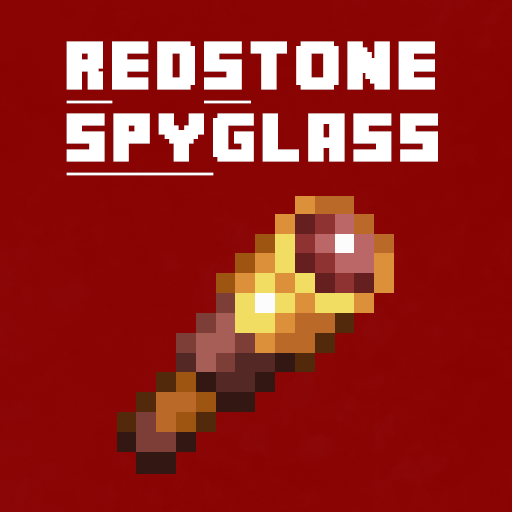
<style>
.page{position:relative;width:512px;height:512px;background:#8a0404}
.page>*{position:absolute;margin:0}
.t1{font:48px/72px "MineCrafter-3";letter-spacing:0.1em;color:#ffffff}
.t2{font:48px/72px "MineCrafter-3";letter-spacing:0.1em;color:#ffffff;text-decoration:underline}
</style>
<div class="page">
<p class="t1" style="left:66px;top:41px;width:372px;height:135px"><span class="t2">R</span>ed<span class="t2">s</span>tone<br><span class="t2">Spy</span>glass</p>
</div>
